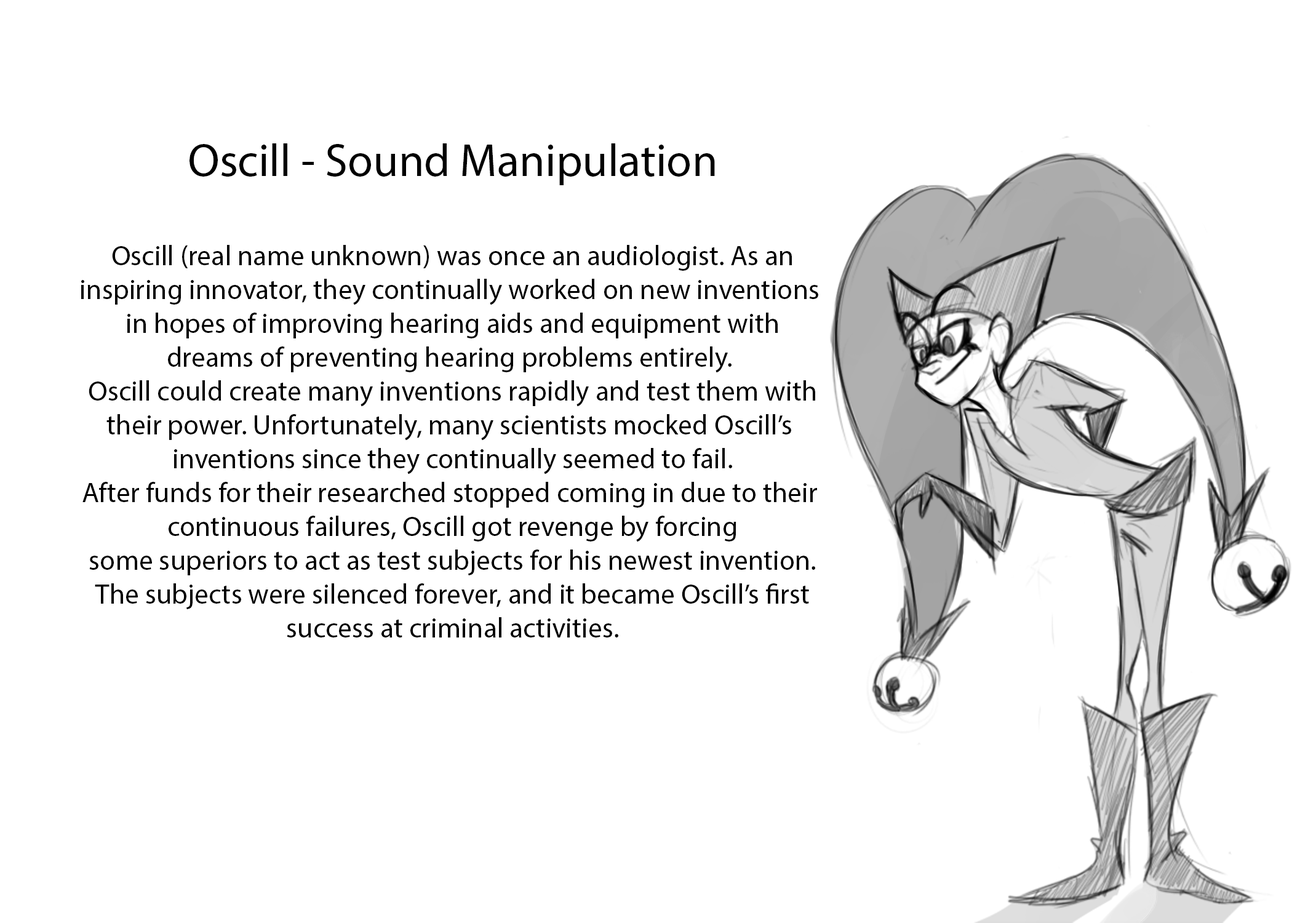
<style>
.page{position:relative;width:1292px;height:923px;background:#ffffff}
.page>*{position:absolute;margin:0}
.t1{font:28.2px "MyriadPro-Regular";color:#000000}
.t2{font:46.1px "MyriadPro-Regular";color:#000000}
</style>
<div class="page">
<p class="t1" style="left:81px;top:143px;width:737px;height:494px;text-align:center"><span class="t2">Oscill - Sound Manipulation<br><br></span>Oscill (real name unknown) was once an audiologist. As an<br>inspiring innovator, they continually worked on new inventions <br>in hopes of improving hearing aids and equipment with<br>dreams of preventing hearing problems entirely. <br>Oscill could create many inventions rapidly and test them with<br>their power. Unfortunately, many scientists mocked Oscill’s <br>inventions since they continually seemed to fail.<br>After funds for their researched stopped coming in due to their <br>continuous failures, Oscill got revenge by forcing<br>some superiors to act as test subjects for his newest invention.<br>The subjects were silenced forever, and it became Oscill’s first<br>success at criminal activities.</p>
</div>
